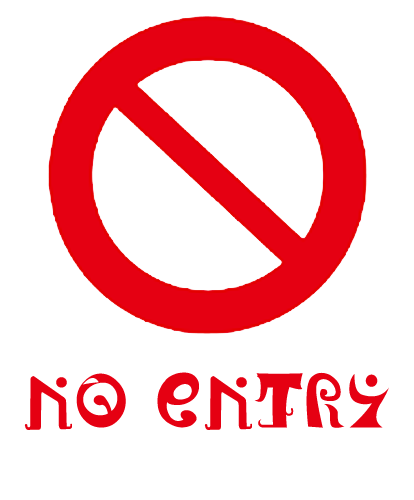
<style>
.page{position:relative;width:414px;height:500px;background:#ffffff}
.page>*{position:absolute;margin:0}
.t1{font:75px "MadokaLetters";letter-spacing:0.03em;color:#e50012}
</style>
<div class="page">
<p class="t1" style="left:24px;top:372px;width:365px;height:58px">No Entry</p>
</div>
